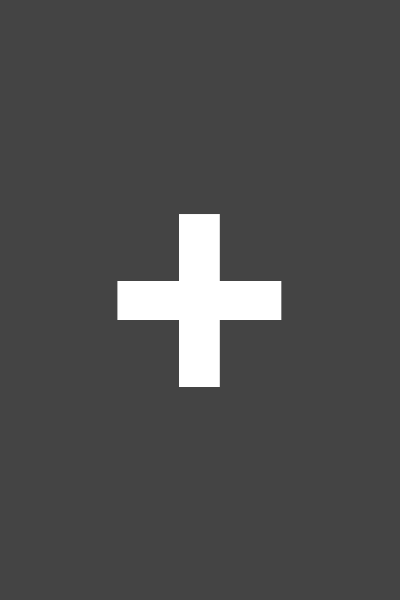
<style>
.page{position:relative;width:400px;height:600px;background:#444444}
.page>*{position:absolute;margin:0}
.t1{font:300px "MuseoSans-900";letter-spacing:0.025em;color:#ffffff}
</style>
<div class="page">
<p class="t1" style="left:117px;top:214px;width:165px;height:173px">+</p>
</div>
